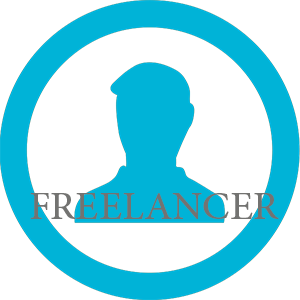
<style>
.page{position:relative;width:300px;height:300px;background:#ffffff}
.page>*{position:absolute;margin:0}
.t1{font:55px "AdobeArabic-Regular";color:#737371;text-transform:uppercase}
</style>
<div class="page">
<p class="t1" style="left:30px;top:193px;width:249px;height:26px">freelancer</p>
</div>
